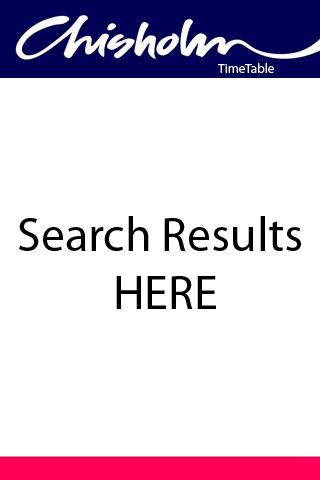
<style>
.page{position:relative;width:320px;height:480px;background:#ffffff}
.page>*{position:absolute;margin:0}
.t1{font:13.3px "MyriadPro-Regular";color:#ffffff}
.t2{font:48px "MyriadPro-Regular";color:#000000}
</style>
<div class="page">
<p class="t1" style="left:217px;top:63px;width:57px;height:10px">TimeTable</p>
<p class="t2" style="left:19px;top:216px;width:282px;height:93px;text-align:center">Search Results <br>HERE</p>
</div>
